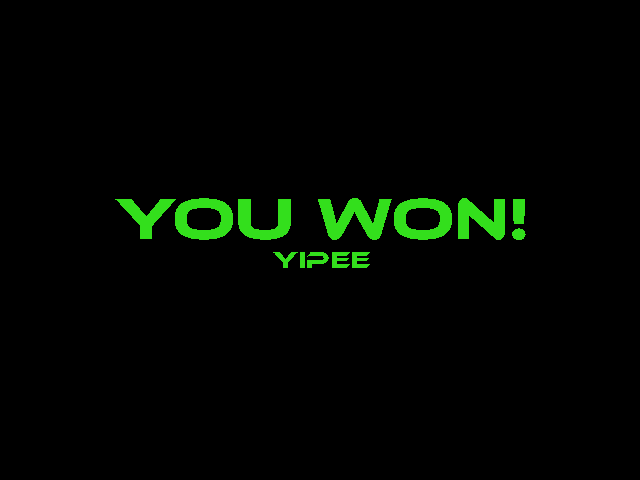
<style>
.page{position:relative;width:640px;height:480px;background:#000000}
.page>*{position:absolute;margin:0}
.t1{font:60px "EthnocentricRg-Regular";color:#33df1c}
.t2{font:24px "EthnocentricRg-Regular";color:#33df1c}
</style>
<div class="page">
<p class="t1" style="left:115px;top:198px;width:411px;height:70px;text-align:center">You won!<br><span class="t2">yipee</span></p>
</div>
